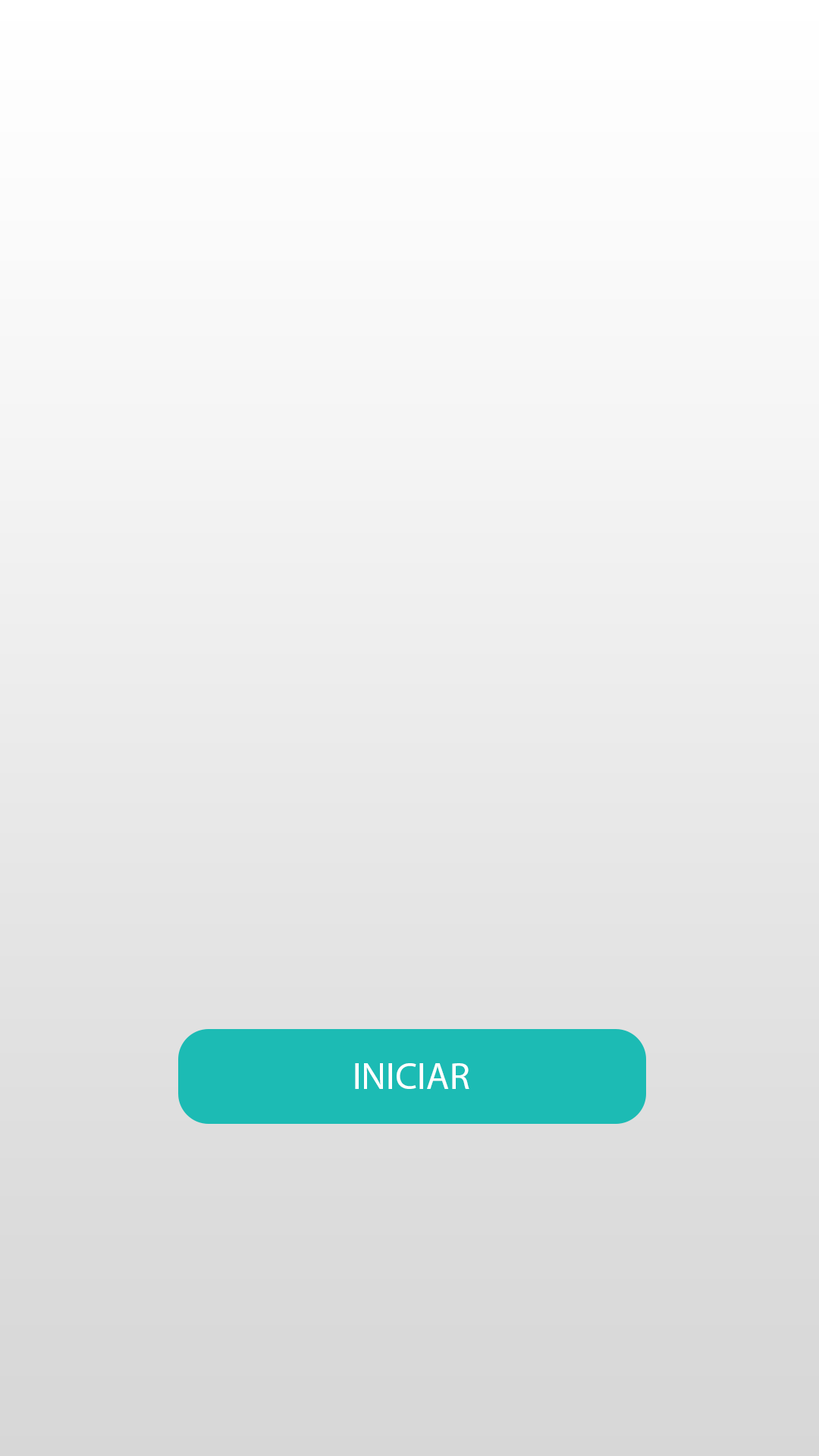
<style>
.page{position:relative;width:819px;height:1456px}
.page>*{position:absolute;margin:0}
.t1{font:37.9px "MyriadPro-Regular";color:#ffffff}
</style>
<div class="page">
<p class="t1" style="left:355px;top:1063px;width:114px;height:26px">INICIAR</p>
</div>
